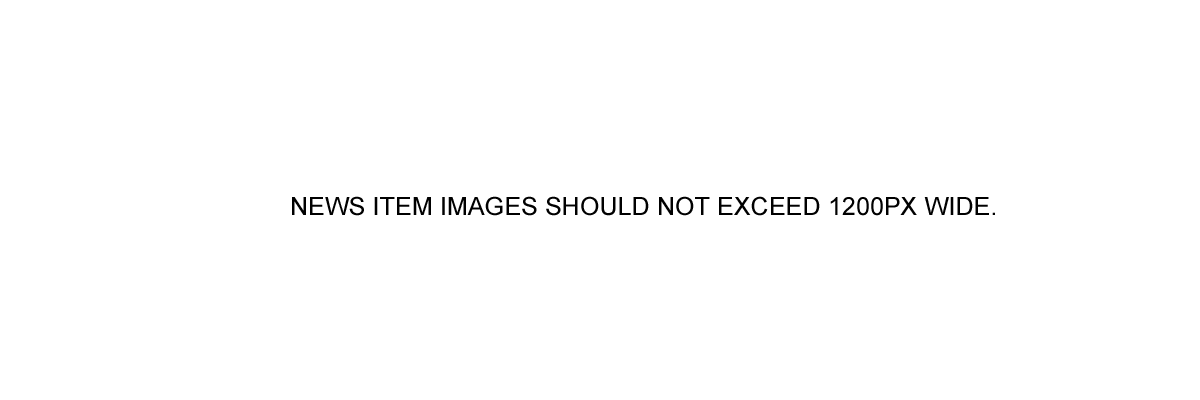
<style>
.page{position:relative;width:1200px;height:400px;background:#ffffff}
.page>*{position:absolute;margin:0}
.t1{font:25px "ArialMT";letter-spacing:0.005em;color:#000000}
</style>
<div class="page">
<p class="t1" style="left:292px;top:196px;width:703px;height:20px">NEWS ITEM IMAGES SHOULD NOT EXCEED 1200PX WIDE.</p>
</div>
